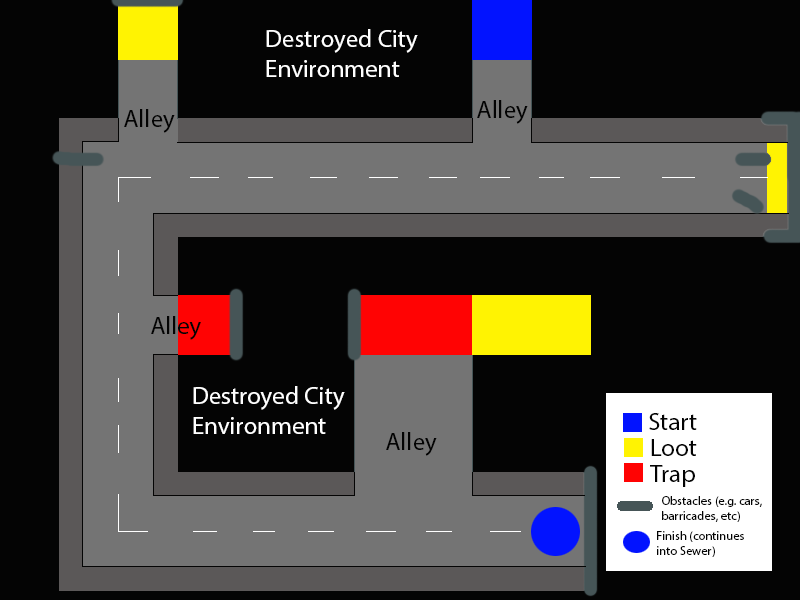
<style>
.page{position:relative;width:800px;height:600px;background:#040404}
.page>*{position:absolute;margin:0}
.t1{font:25px "MyriadPro-Regular";color:#ffffff}
.t2{font:25px "MyriadPro-Regular";color:#030303}
.t3{font:12.5px "MyriadPro-Regular";color:#030303}
</style>
<div class="page">
<p class="t1" style="left:266px;top:29px;width:152px;height:48px">Destroyed City Environment</p>
<p class="t2" style="left:477px;top:100px;width:51px;height:24px">Alley</p>
<p class="t2" style="left:124px;top:109px;width:51px;height:24px">Alley</p>
<p class="t2" style="left:151px;top:316px;width:50px;height:24px">Alley</p>
<p class="t1" style="left:193px;top:386px;width:152px;height:48px">Destroyed City Environment</p>
<p class="t2" style="left:649px;top:413px;width:48px;height:17px">Start</p>
<p class="t2" style="left:386px;top:432px;width:51px;height:24px">Alley</p>
<p class="t2" style="left:651px;top:439px;width:46px;height:17px">Loot</p>
<p class="t2" style="left:650px;top:465px;width:45px;height:22px">Trap</p>
<p class="t3" style="left:662px;top:496px;width:100px;height:26px">Obstacles (e.g. cars, barricades, etc)</p>
<p class="t3" style="left:657px;top:531px;width:87px;height:26px">Finish (continues into Sewer)</p>
</div>
